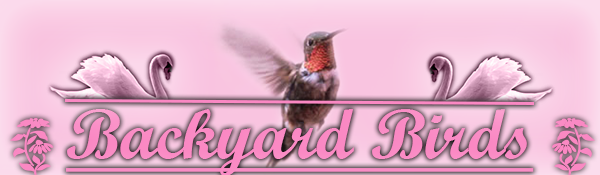
<style>
.page{position:relative;width:600px;height:175px}
.page>*{position:absolute;margin:0}
.t1{font:70.8px "ScriptMTBold";color:#fa88c3;text-decoration:underline}
</style>
<div class="page">
<p class="t1" style="left:66px;top:109px;width:468px;height:67px">Backyard Birds</p>
</div>
